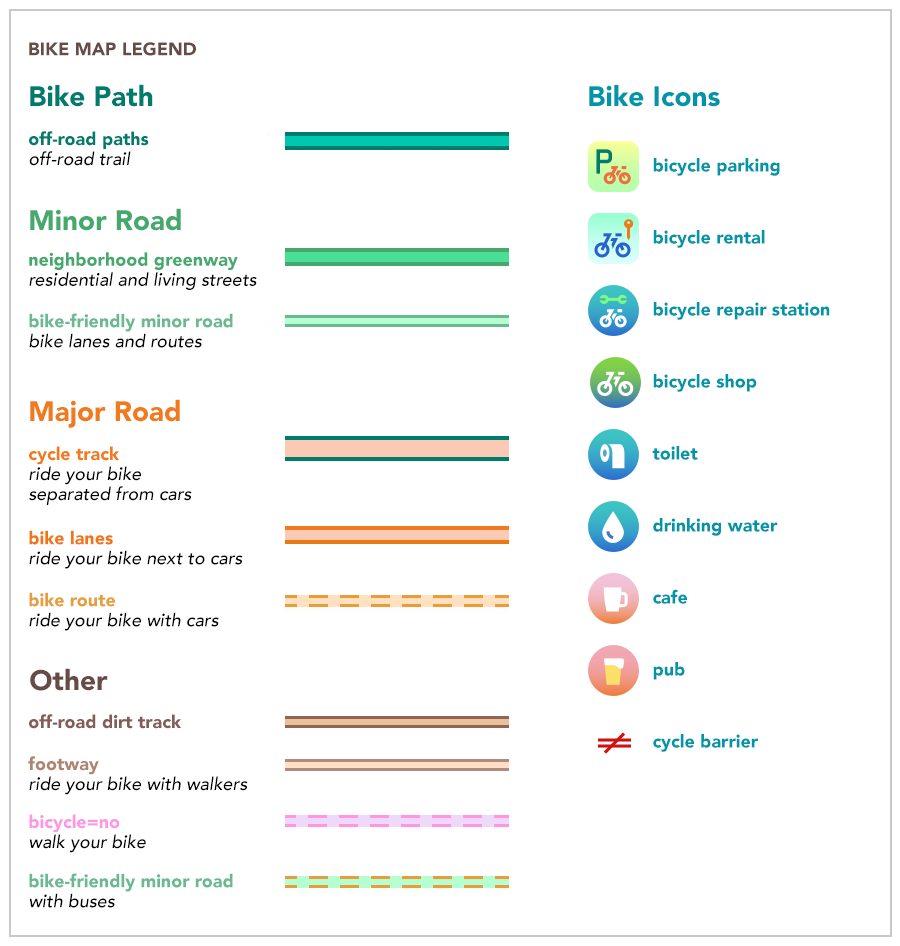
<style>
.page{position:relative;width:900px;height:946px;background:#ffffff}
.page>*{position:absolute;margin:0}
.t1{font:18px "Avenir-Black";color:#664b46;text-transform:uppercase}
.t2{font:28px "Avenir-Black";color:#007c6d}
.t3{font:28px "Avenir-Black";color:#0096a8}
.t4{font:18px/20px "Avenir-Black";color:#007c6d}
.t5{font:18px/20px "Avenir-MediumOblique";color:#000000}
.t6{font:18px/72px "Avenir-Black";color:#0096a8}
.t7{font:28px "Avenir-Black";color:#45a96e}
.t8{font:18px/20px "Avenir-Black";color:#45a96e}
.t9{font:18px/20px "Avenir-Black";color:#6ab991}
.t10{font:28px "Avenir-Black";color:#f17b1c}
.t11{font:18px/20px "Avenir-Black";color:#f17b1c}
.t12{font:18px/20px "Avenir-Black";color:#f47412}
.t13{font:18px/20px "Avenir-Black";color:#e89d3c}
.t14{font:28px "Avenir-Black";color:#664b46}
.t15{font:18px "Avenir-Black";color:#845d59}
.t16{font:18px/20px "Avenir-Black";color:#ae8471}
.t17{font:18px/20px "Avenir-Black";color:#ff96e3}
</style>
<div class="page">
<p class="t1" style="left:29px;top:42px;width:167px;height:14px">Bike Map Legend</p>
<p class="t2" style="left:30px;top:84px;width:123px;height:23px">Bike Path</p>
<p class="t3" style="left:589px;top:85px;width:131px;height:22px">Bike Icons</p>
<p class="t4" style="left:29px;top:131px;width:120px;height:35px">off-road paths<br><span class="t5">off-road trail</span></p>
<p class="t6" style="left:652px;top:158px;width:178px;height:594px">bicycle parking<br>bicycle rental<br>bicycle repair station<br>bicycle shop<br>toilet<br>drinking water<br>cafe<br>pub<br>cycle barrier</p>
<p class="t7" style="left:30px;top:208px;width:151px;height:23px">Minor Road</p>
<p class="t5" style="left:29px;top:252px;width:228px;height:38px"><span class="t8">neighborhood greenway<br></span>residential and living streets</p>
<p class="t9" style="left:29px;top:313px;width:204px;height:35px">bike-friendly minor road<br><span class="t5">bike lanes and routes</span></p>
<p class="t10" style="left:30px;top:399px;width:150px;height:29px">Major Road</p>
<p class="t5" style="left:29px;top:446px;width:163px;height:59px"><span class="t11">cycle track<br></span>ride your bike <br>separated from cars</p>
<p class="t5" style="left:29px;top:530px;width:214px;height:39px"><span class="t12">bike lanes<br></span>ride your bike next to cars</p>
<p class="t5" style="left:29px;top:592px;width:190px;height:39px"><span class="t13">bike route<br></span>ride your bike with cars</p>
<p class="t14" style="left:30px;top:668px;width:78px;height:23px">Other</p>
<p class="t15" style="left:29px;top:714px;width:153px;height:15px">off-road dirt track</p>
<p class="t5" style="left:28px;top:756px;width:220px;height:39px"><span class="t16">footway<br></span>ride your bike with walkers</p>
<p class="t5" style="left:29px;top:814px;width:117px;height:39px"><span class="t17">bicycle=no<br></span>walk your bike</p>
<p class="t9" style="left:29px;top:873px;width:204px;height:35px">bike-friendly minor road<br><span class="t5">with buses</span></p>
</div>
